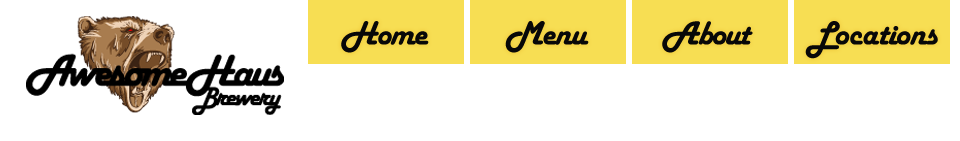
<style>
.page{position:relative;width:960px;height:141px;background:#ffffff}
.page>*{position:absolute;margin:0}
.t1{font:35px "HarlowSolid";letter-spacing:-0.04em;color:#080808}
</style>
<div class="page">
<p class="t1" style="left:341px;top:21px;width:88px;height:32px">Home</p>
<p class="t1" style="left:505px;top:21px;width:84px;height:32px">Menu</p>
<p class="t1" style="left:662px;top:21px;width:91px;height:32px">About</p>
<p class="t1" style="left:805px;top:21px;width:133px;height:38px">Locations</p>
</div>
